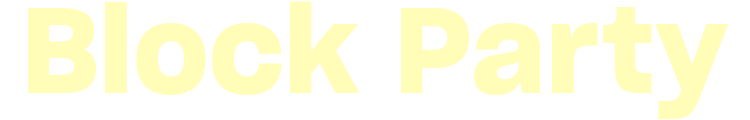
<style>
.page{position:relative;width:750px;height:120px;background:#ffffff}
.page>*{position:absolute;margin:0}
.t1{font:118.2px "SharpGroteskSmBold20";letter-spacing:0.015em;color:#fffdb7}
</style>
<div class="page">
<p class="t1" style="left:28px;top:1px;width:701px;height:118px">Block Party</p>
</div>
